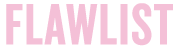
<style>
.page{position:relative;width:178px;height:50px;background:#ffffff}
.page>*{position:absolute;margin:0}
.t1{font:60px "Knockout-HTF48-Featherweight";color:#f4c0d7;text-transform:uppercase;font-weight:bold}
</style>
<div class="page">
<p class="t1" style="left:6px;top:3px;width:167px;height:43px">flawlist</p>
</div>
